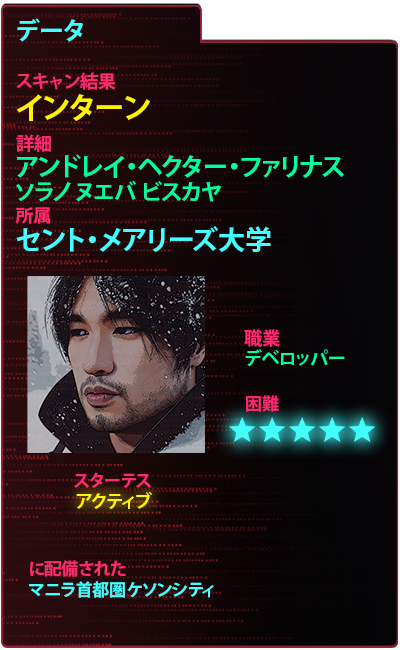
<style>
.page{position:relative;width:400px;height:650px}
.page>*{position:absolute;margin:0}
.t1{font:25px "KozGoPr6N-Bold";color:#43ffff}
.t2{font:18px "KozGoPr6N-Bold";color:#ff296d}
.t3{font:30px "KozGoPr6N-Bold";color:#fdf500}
.t4{font:25px "KozGoPr6N-Bold";color:#00ff9f}
.t5{font:22px "KozGoPr6N-Bold";color:#00ff9f}
.t6{font:27px "KozGoPr6N-Bold";color:#43ffff}
.t7{font:18px "KozGoPr6N-Bold";color:#00ff9f}
.t8{font:17px "KozGoPr6N-Bold";color:#ff296d}
.t9{font:18px "KozGoPr6N-Bold";color:#fdf500}
.t10{font:17px "KozGoPr6N-Bold";color:#43ffff}
</style>
<div class="page">
<p class="t1" style="left:17px;top:18px;width:67px;height:24px">データ</p>
<p class="t2" style="left:16px;top:72px;width:100px;height:18px">スキャン結果</p>
<p class="t3" style="left:16px;top:94px;width:134px;height:27px">インターン</p>
<p class="t2" style="left:16px;top:134px;width:35px;height:19px">詳細</p>
<p class="t4" style="left:17px;top:154px;width:327px;height:24px">アンドレイ・ヘクター・ファリナス</p>
<p class="t5" style="left:16px;top:180px;width:206px;height:22px">ソラノ ﾇエバ ビスカヤ</p>
<p class="t2" style="left:15px;top:207px;width:36px;height:17px">所属</p>
<p class="t6" style="left:16px;top:226px;width:255px;height:26px">セント・メアリーズ大学</p>
<p class="t2" style="left:244px;top:329px;width:36px;height:18px">職業</p>
<p class="t7" style="left:245px;top:349px;width:100px;height:18px">デベロッパー</p>
<p class="t8" style="left:246px;top:395px;width:33px;height:17px">困難</p>
<p class="t8" style="left:74px;top:472px;width:77px;height:16px">スターテス</p>
<p class="t9" style="left:76px;top:491px;width:76px;height:19px">アクティブ</p>
<p class="t8" style="left:30px;top:560px;width:96px;height:17px">に配備された</p>
<p class="t10" style="left:29px;top:581px;width:185px;height:17px">マニラ首都圏ケソンシティ</p>
</div>
